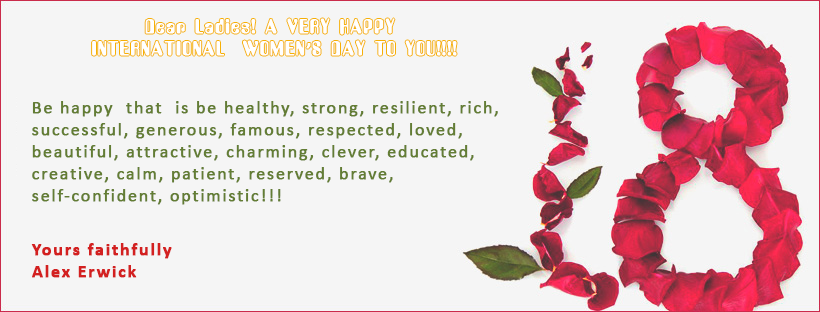
<style>
.page{position:relative;width:820px;height:312px;background:#f5f5f5}
.page>*{position:absolute;margin:0}
.t1{font:18px/22px "Amethyst";letter-spacing:0.075em;color:#ffffff;font-weight:bold}
.t2{font:18px/22px "Calibri-Bold";letter-spacing:0.075em;color:#ffffff;font-weight:bold}
.t3{font:18px/22px "Calibri";letter-spacing:0.075em;color:#637d34;font-weight:bold}
.t4{font:18px/22px "Calibri-Bold";letter-spacing:0.075em;color:#d32020;font-weight:bold}
</style>
<div class="page">
<p class="t1" style="left:92px;top:18px;width:365px;height:38px;text-align:center">Dear Ladies! A VERY HAPPY<br> INTERNATIONAL  WOMEN<span class="t2">’</span>S DAY TO YOU!!!!</p>
<p class="t3" style="left:32px;top:101px;width:466px;height:104px">Be happy  that  is be healthy, strong, resilient, rich, successful, generous, famous, respected, loved,   beautiful, attractive, charming, clever, educated, creative, calm, patient, reserved, brave, self-confident, optimistic!!!</p>
<p class="t4" style="left:31px;top:243px;width:141px;height:35px">Yours faithfully<br>Alex Erwick</p>
</div>
